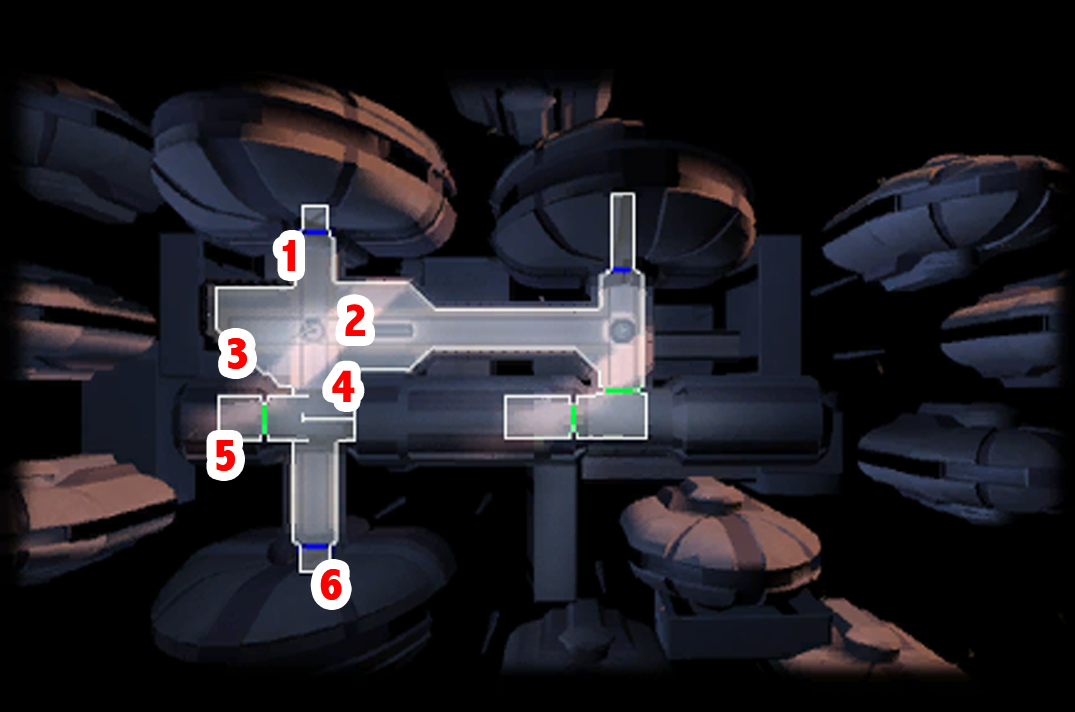
<style>
.page{position:relative;width:1075px;height:712px;background:#000000}
.page>*{position:absolute;margin:0}
.t1{font:48px "AbadiMT-CondensedExtraBold";color:#ff0000}
</style>
<div class="page">
<p class="t1" style="left:282px;top:240px;width:13px;height:31px">1</p>
<p class="t1" style="left:345px;top:304px;width:20px;height:32px">2</p>
<p class="t1" style="left:228px;top:338px;width:19px;height:31px">3</p>
<p class="t1" style="left:332px;top:370px;width:23px;height:32px">4</p>
<p class="t1" style="left:216px;top:440px;width:19px;height:31px">5</p>
<p class="t1" style="left:320px;top:569px;width:22px;height:31px">6</p>
</div>
